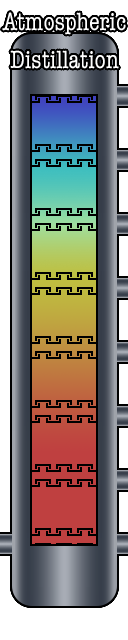
<style>
.page{position:relative;width:128px;height:640px}
.page>*{position:absolute;margin:0}
.t1{font:25.8px/38.2px "AmericanTypewriter-Condensed";color:#ffffff}
</style>
<div class="page">
<p class="t1" style="left:2px;top:12px;width:124px;height:57px;text-align:center">Atmospheric<br>Distillation</p>
</div>
